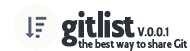
<style>
.page{position:relative;width:190px;height:51px;background:#ffffff}
.page>*{position:absolute;margin:0}
.t1{font:38px "Collegiate";letter-spacing:-0.025em;color:#2d313a;font-weight:bold}
.t2{font:38px "Collegiate";letter-spacing:-0.01em;color:#2d313a;font-weight:bold}
.t3{font:38px "Collegiate";letter-spacing:-0.011em;color:#2d313a;font-weight:bold}
.t4{font:13.2px "Collegiate";letter-spacing:-0.025em;color:#2d313a}
.t5{font:13.2px "Collegiate";letter-spacing:-0.01em;color:#2d313a}
</style>
<div class="page">
<p class="t1" style="left:61px;top:11px;width:74px;height:36px"><span class="t2">g</span><span class="t3">it</span><span class="t2">l</span>ist</p>
<p class="t4" style="left:137px;top:27px;width:32px;height:10px">V.0.0.1</p>
<p class="t5" style="left:78px;top:39px;width:110px;height:12px">the best way to share Git</p>
</div>
